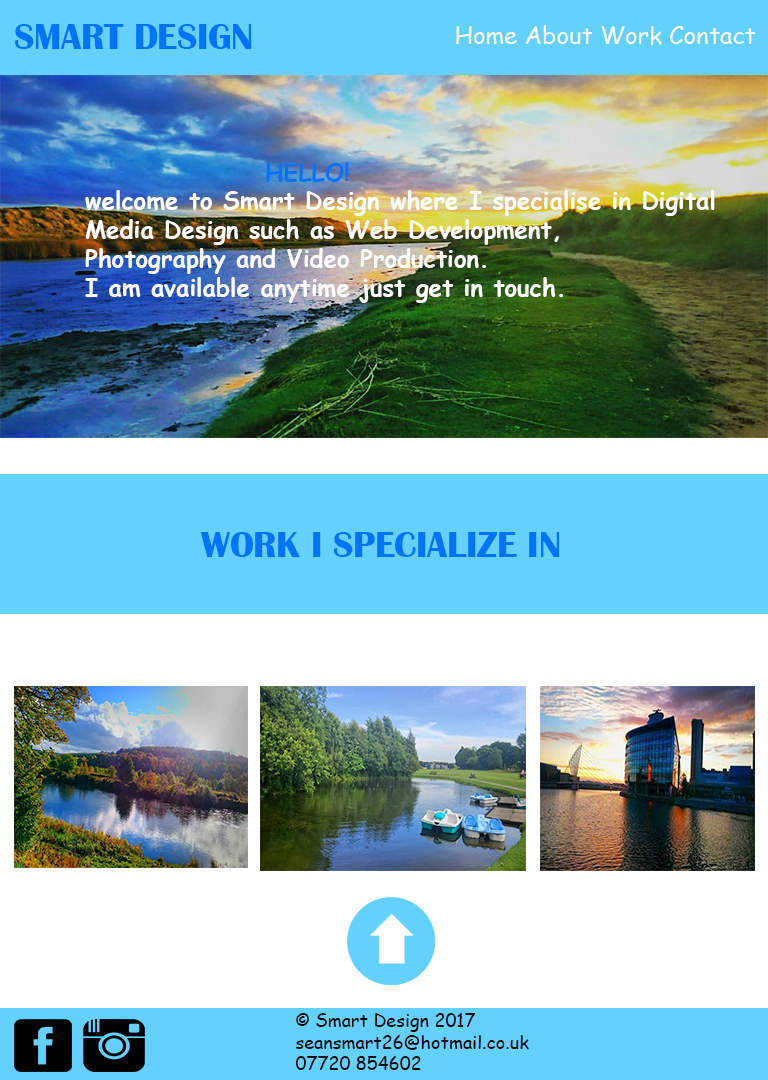
<style>
.page{position:relative;width:768px;height:1080px;background:#ffffff}
.page>*{position:absolute;margin:0}
.t1{font:37.8px "BritannicBold";color:#0373fe;scale:0.96 1}
.t2{font:24px "ComicSansMS";color:#fafcfe}
.t3{font:24px "ComicSansMS-Bold";color:#ffffff}
.t4{font:24px "ComicSansMS-Bold";color:#0373fe}
.t5{font:18px "ComicSansMS";color:#040404}
</style>
<div class="page">
<p class="t1" style="left:15px;top:24px;width:237px;height:25px">SMART DESIGN</p>
<p class="t2" style="left:456px;top:25px;width:300px;height:20px">Home About Work Contact</p>
<p class="t3" style="left:85px;top:162px;width:630px;height:141px"><span class="t4">     HELLO!<br></span>welcome to Smart Design where I specialise in Digital<br>Media Design such as Web Development,<br>Photography and Video Production.<br>I am available anytime just get in touch.</p>
<p class="t1" style="left:200px;top:532px;width:360px;height:25px">WORK I SPECIALIZE IN</p>
<p class="t5" style="left:295px;top:1013px;width:234px;height:57px">© Smart Design 2017<br>seansmart26@hotmail.co.uk<br>07720 854602</p>
</div>
